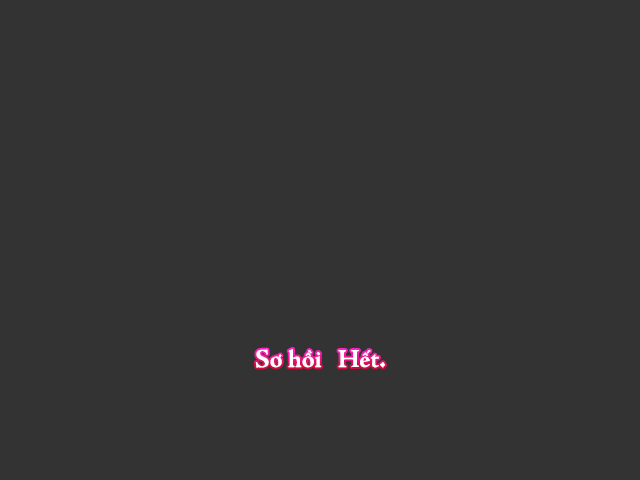
<style>
.page{position:relative;width:640px;height:480px;background:#333333}
.page>*{position:absolute;margin:0}
.t1{font:26px "SVN-AdobeJensonBold";color:#ffffff}
</style>
<div class="page">
<p class="t1" style="left:255px;top:349px;width:131px;height:19px">Sơ hồi   Hết.</p>
</div>
